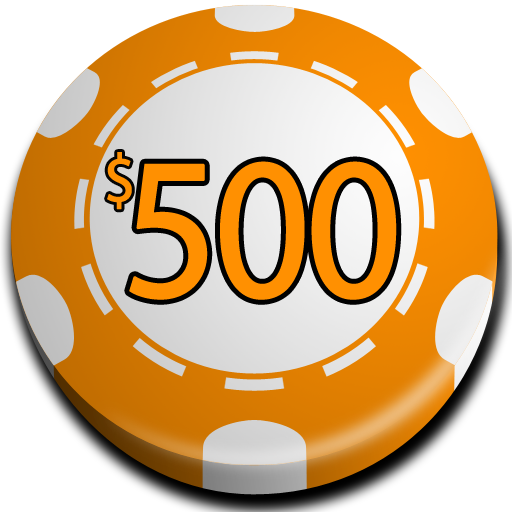
<style>
.page{position:relative;width:512px;height:512px;background:#ffffff}
.page>*{position:absolute;margin:0}
.t1{font:117.9px "MyriadPro-Regular";letter-spacing:-0.05em;color:#ff9001;font-variant:small-caps;font-weight:bold;scale:0.92 1}
.t2{font:346.9px "MyriadPro-Regular";letter-spacing:-0.05em;color:#ff9001;font-variant:small-caps;font-weight:bold;scale:0.92 1}
</style>
<div class="page">
<p class="t1" style="left:107px;top:152px;width:25px;height:58px">$</p>
<p class="t2" style="left:129px;top:161px;width:268px;height:139px">500</p>
</div>
